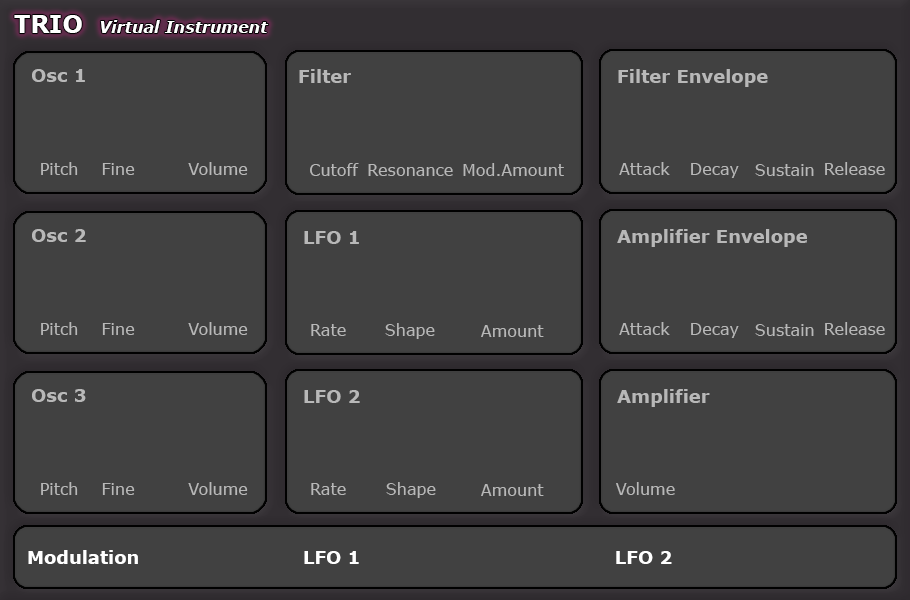
<style>
.page{position:relative;width:910px;height:600px;background:#414141}
.page>*{position:absolute;margin:0}
.t1{font:16px "Verdana-BoldItalic";color:#ffffff}
.t2{font:24px "Verdana-Bold";color:#ffffff}
.t3{font:18px "Verdana-Bold";color:#b8b8b8}
.t4{font:16px "Verdana";color:#b8b8b8}
.t5{font:18px "Verdana-Bold";color:#ffffff}
</style>
<div class="page">
<p class="t1" style="left:14px;top:15px;width:255px;height:18px"><span class="t2">TRIO  </span>Virtual Instrument</p>
<p class="t3" style="left:32px;top:69px;width:53px;height:13px">Osc 1</p>
<p class="t3" style="left:299px;top:69px;width:52px;height:14px">Filter</p>
<p class="t3" style="left:618px;top:69px;width:150px;height:18px">Filter Envelope</p>
<p class="t4" style="left:41px;top:162px;width:37px;height:13px">Pitch</p>
<p class="t4" style="left:102px;top:163px;width:33px;height:12px">Fine</p>
<p class="t4" style="left:188px;top:162px;width:60px;height:13px">Volume</p>
<p class="t4" style="left:310px;top:163px;width:49px;height:13px">Cutoff</p>
<p class="t4" style="left:368px;top:164px;width:85px;height:12px">Resonance</p>
<p class="t4" style="left:463px;top:163px;width:101px;height:13px">Mod.Amount</p>
<p class="t4" style="left:619px;top:162px;width:51px;height:13px">Attack</p>
<p class="t4" style="left:691px;top:163px;width:48px;height:15px">Decay</p>
<p class="t4" style="left:755px;top:164px;width:59px;height:12px">Sustain</p>
<p class="t4" style="left:825px;top:162px;width:60px;height:13px">Release</p>
<p class="t3" style="left:32px;top:229px;width:54px;height:13px">Osc 2</p>
<p class="t3" style="left:304px;top:231px;width:55px;height:13px">LFO 1</p>
<p class="t3" style="left:617px;top:229px;width:190px;height:18px">Amplifier Envelope</p>
<p class="t4" style="left:41px;top:322px;width:37px;height:13px">Pitch</p>
<p class="t4" style="left:102px;top:323px;width:33px;height:12px">Fine</p>
<p class="t4" style="left:188px;top:322px;width:60px;height:13px">Volume</p>
<p class="t4" style="left:311px;top:324px;width:35px;height:12px">Rate</p>
<p class="t4" style="left:385px;top:323px;width:50px;height:16px">Shape</p>
<p class="t4" style="left:481px;top:325px;width:63px;height:12px">Amount</p>
<p class="t4" style="left:619px;top:322px;width:51px;height:13px">Attack</p>
<p class="t4" style="left:691px;top:323px;width:48px;height:15px">Decay</p>
<p class="t4" style="left:755px;top:324px;width:59px;height:12px">Sustain</p>
<p class="t4" style="left:825px;top:322px;width:60px;height:13px">Release</p>
<p class="t3" style="left:32px;top:389px;width:54px;height:13px">Osc 3</p>
<p class="t3" style="left:304px;top:390px;width:56px;height:13px">LFO 2</p>
<p class="t3" style="left:617px;top:389px;width:93px;height:18px">Amplifier</p>
<p class="t4" style="left:41px;top:482px;width:37px;height:13px">Pitch</p>
<p class="t4" style="left:102px;top:483px;width:33px;height:12px">Fine</p>
<p class="t4" style="left:188px;top:482px;width:60px;height:13px">Volume</p>
<p class="t4" style="left:311px;top:483px;width:35px;height:12px">Rate</p>
<p class="t4" style="left:386px;top:482px;width:50px;height:16px">Shape</p>
<p class="t4" style="left:481px;top:484px;width:63px;height:12px">Amount</p>
<p class="t4" style="left:616px;top:482px;width:59px;height:13px">Volume</p>
<p class="t5" style="left:28px;top:550px;width:110px;height:14px">Modulation</p>
<p class="t5" style="left:304px;top:551px;width:55px;height:13px">LFO 1</p>
<p class="t5" style="left:616px;top:551px;width:56px;height:13px">LFO 2</p>
</div>
